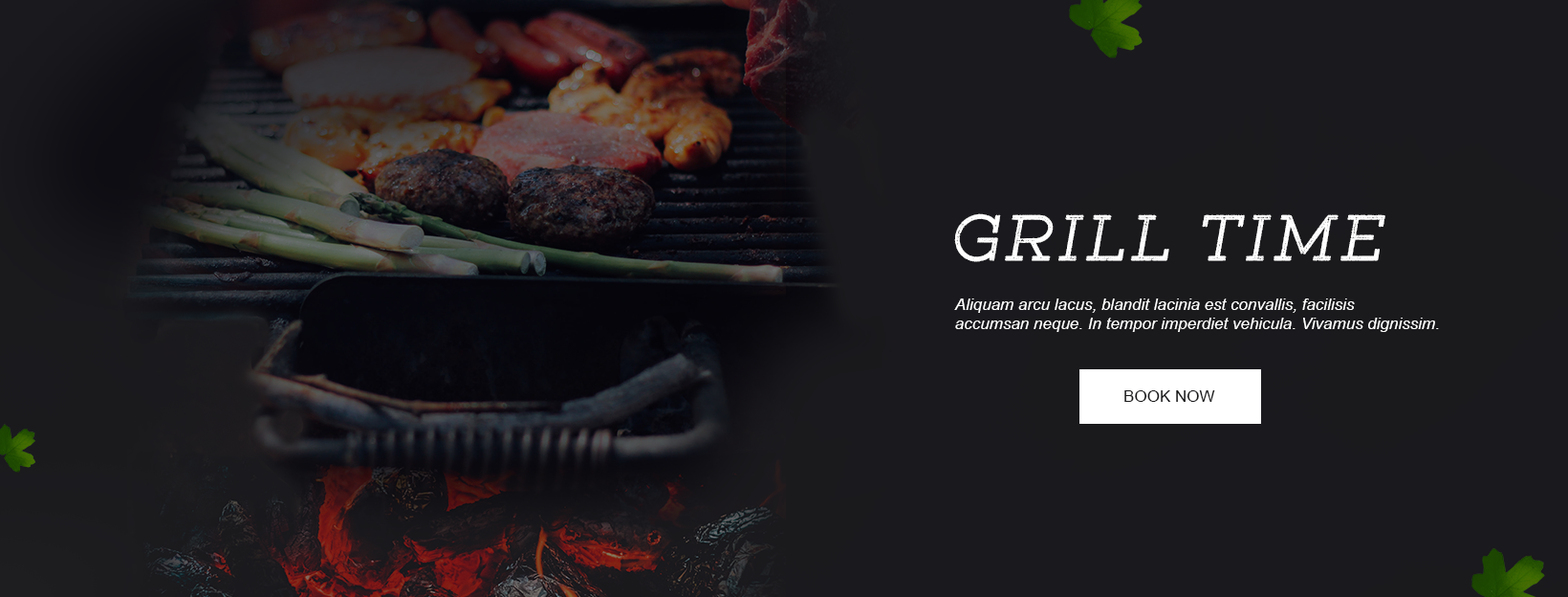
<style>
.page{position:relative;width:1568px;height:597px;background:#1a191d}
.page>*{position:absolute;margin:0}
.t1{font:57.4px "GistRoughLightThree";letter-spacing:0.1em;color:#ffffff;text-transform:uppercase}
.t2{font:16.3px "Arial-ItalicMT";color:#ffffff}
.t3{font:16.3px "ArialMT";color:#1a1a1d}
</style>
<div class="page">
<p class="t1" style="left:954px;top:213px;width:431px;height:49px">Grill Time</p>
<p class="t2" style="left:954px;top:298px;width:485px;height:34px">Aliquam arcu lacus, blandit lacinia est convallis, facilisis <br>accumsan neque. In tempor imperdiet vehicula. Vivamus dignissim.</p>
<p class="t3" style="left:1124px;top:390px;width:91px;height:12px">BOOK NOW</p>
</div>
